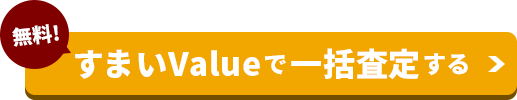
<style>
.page{position:relative;width:517px;height:100px;background:#f2a700}
.page>*{position:absolute;margin:0}
.t1{font:20px "NotoSansCJKjp-Black";color:#ffffff}
.t2{font:32px "NotoSansCJKjp-Black";color:#ffffff}
.t3{font:24px "NotoSansCJKjp-Black";color:#ffffff}
</style>
<div class="page">
<p class="t1" style="left:12px;top:24px;width:47px;height:23px;rotate:-6deg">無料!</p>
<p class="t2" style="left:75px;top:49px;width:185px;height:30px">すまいValue</p>
<p class="t2" style="left:291px;top:48px;width:128px;height:32px">一括査定</p>
<p class="t3" style="left:424px;top:53px;width:44px;height:23px">する</p>
<p class="t3" style="left:264px;top:55px;width:22px;height:20px">で</p>
</div>
